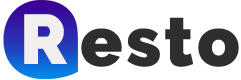
<style>
.page{position:relative;width:241px;height:80px;background:#ffffff}
.page>*{position:absolute;margin:0}
.t1{font:70px "Raleway-Black";letter-spacing:0.05em;color:#f1f0ef}
.t2{font:70px "Raleway-Black";letter-spacing:0.05em;color:#2e2e2f}
</style>
<div class="page">
<p class="t1" style="left:24px;top:14px;width:44px;height:50px">R</p>
<p class="t2" style="left:81px;top:17px;width:158px;height:50px">esto</p>
</div>
